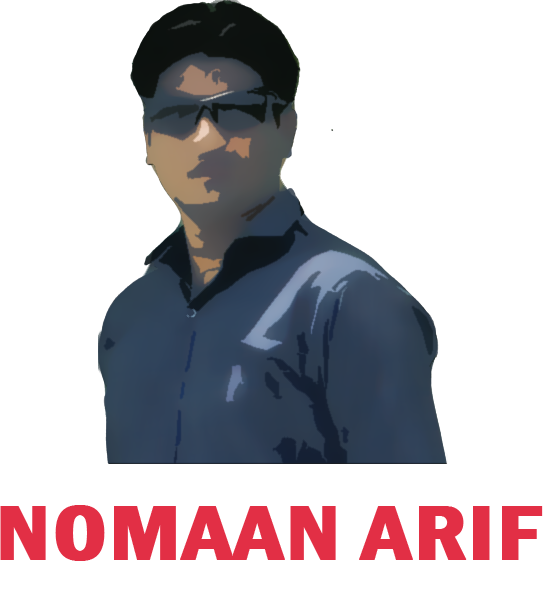
<style>
.page{position:relative;width:546px;height:614px;background:#ffffff}
.page>*{position:absolute;margin:0}
.t1{font:79px "FranklinGothic-DemiCond";color:#e22f45;text-transform:uppercase;font-weight:bold;scale:1.21 1}
</style>
<div class="page">
<p class="t1" style="left:0px;top:505px;width:543px;height:56px">NOMAAN ARIF</p>
</div>
